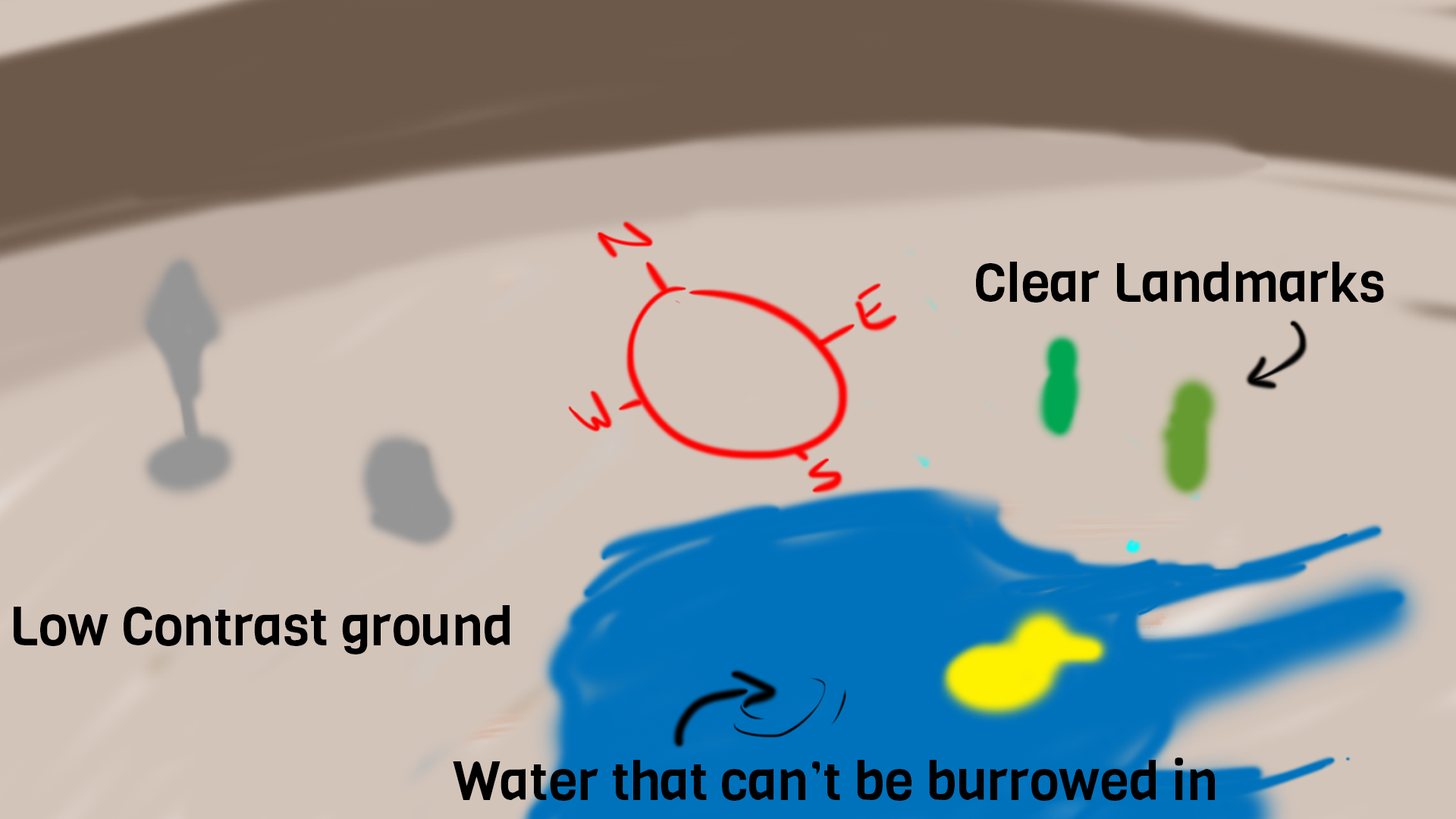
<style>
.page{position:relative;width:1456px;height:819px;background:#d3c4b9}
.page>*{position:absolute;margin:0}
.t1{font:53.8px "Viga-Regular";color:#000000}
</style>
<div class="page">
<p class="t1" style="left:976px;top:262px;width:408px;height:41px">Clear Landmarks</p>
<p class="t1" style="left:14px;top:605px;width:496px;height:49px">Low Contrast ground</p>
<p class="t1" style="left:453px;top:758px;width:762px;height:43px">Water that can’t be burrowed in</p>
</div>
